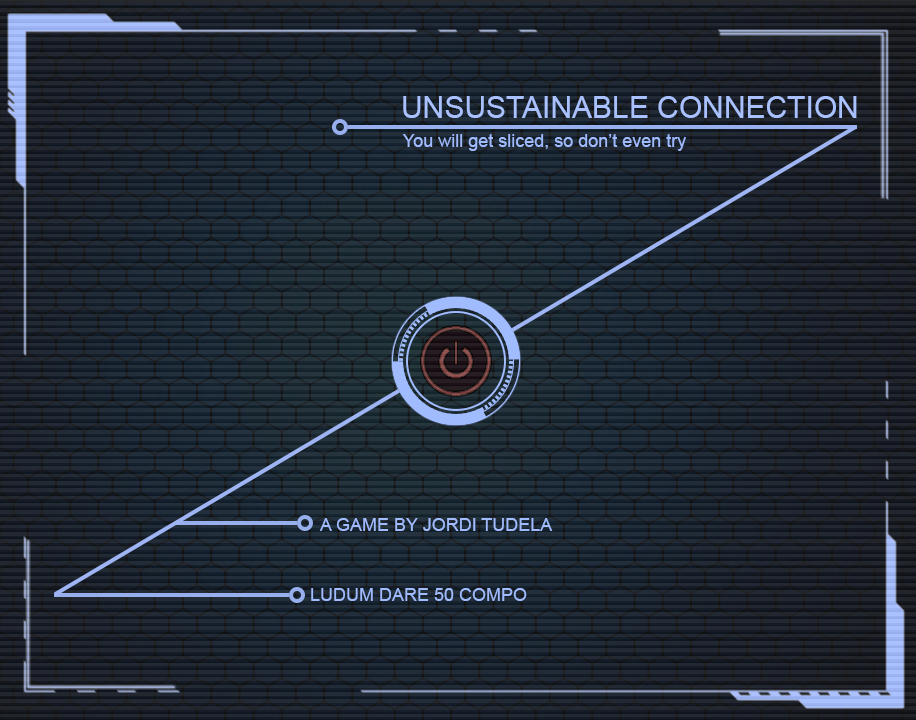
<style>
.page{position:relative;width:916px;height:720px}
.page>*{position:absolute;margin:0}
.t1{font:30px "ArialMT";color:#aac1ff}
.t2{font:18px "ArialMT";color:#a1bbff}
</style>
<div class="page">
<p class="t1" style="left:403px;top:96px;width:454px;height:22px">UNSUSTAINABLE CONNECTION</p>
<p class="t2" style="left:402px;top:134px;width:284px;height:17px">You will get sliced, so don’t even try</p>
<p class="t2" style="left:319px;top:518px;width:234px;height:13px">A GAME BY JORDI TUDELA</p>
<p class="t2" style="left:311px;top:588px;width:216px;height:13px">LUDUM DARE 50 COMPO</p>
</div>
